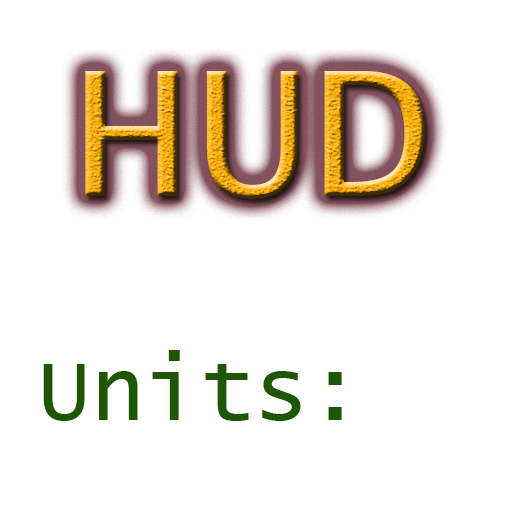
<style>
.page{position:relative;width:512px;height:512px;background:#ffffff}
.page>*{position:absolute;margin:0}
.t1{font:200px "LucidaConsole"}
.t2{font:90px "LucidaConsole";color:#1e5603}
.t3{font:90px "LucidaConsole";color:#ffffff}
</style>
<div class="page">
<p class="t1" style="left:85px;top:71px;width:340px;height:128px">HUD</p>
<p class="t2" style="left:43px;top:350px;width:425px;height:71px">Units:<span class="t3">cm</span></p>
</div>
